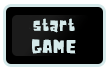
<style>
.page{position:relative;width:110px;height:70px;background:#000000}
.page>*{position:absolute;margin:0}
.t1{font:18px "Noot";color:#d5e9ea}
</style>
<div class="page">
<p class="t1" style="left:32px;top:18px;width:44px;height:36px;text-align:center">start<br>GAME</p>
</div>
